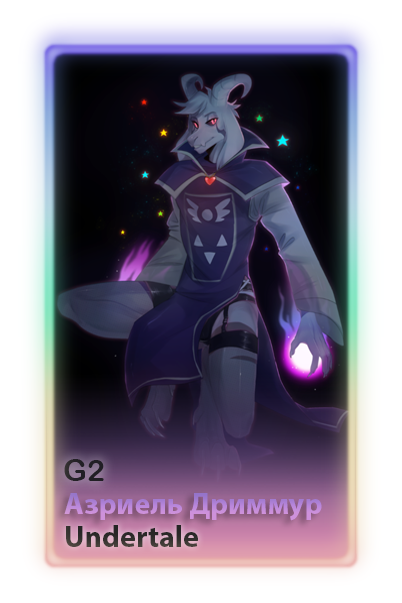
<style>
.page{position:relative;width:402px;height:603px}
.page>*{position:absolute;margin:0}
.t1{font:30px "ArialRoundedMTBold";color:#211f25}
.t2{font:30px "MyriadPro-Bold";color:#bb88db}
.t3{font:30px "MyriadPro-Bold";color:#242424}
</style>
<div class="page">
<p class="t1" style="left:64px;top:459px;width:40px;height:22px">G2</p>
<p class="t2" style="left:64px;top:493px;width:258px;height:28px">Азриель Дриммур</p>
<p class="t3" style="left:66px;top:525px;width:132px;height:22px">Undertale</p>
</div>
